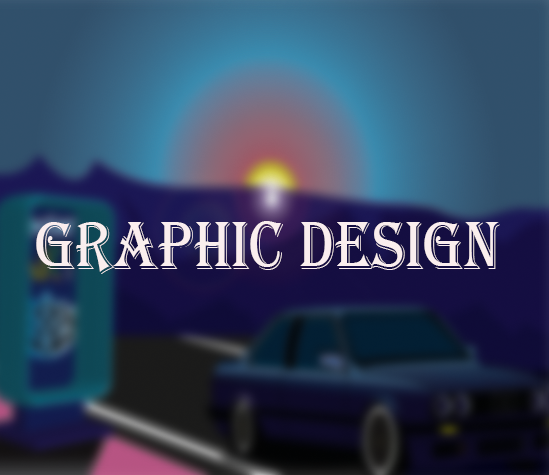
<style>
.page{position:relative;width:549px;height:475px}
.page>*{position:absolute;margin:0}
.t1{font:70.6px "Algerian";color:#faeeee;scale:0.84 1}
</style>
<div class="page">
<p class="t1" style="left:36px;top:221px;width:464px;height:53px">graphic DESIGN</p>
</div>
